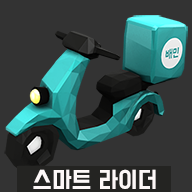
<style>
.page{position:relative;width:192px;height:192px;background:#333333}
.page>*{position:absolute;margin:0}
.t1{font:20px "BMDoHyeon";letter-spacing:0.025em;color:#fdf8f8}
</style>
<div class="page">
<p class="t1" style="left:33px;top:169px;width:123px;height:20px">스마트 라이더</p>
</div>
